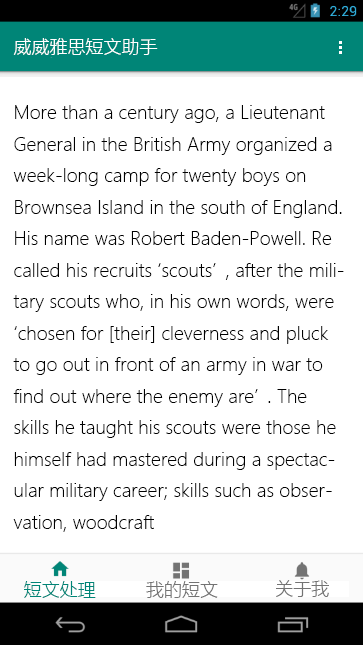
<style>
.page{position:relative;width:363px;height:645px;background:#ffffff}
.page>*{position:absolute;margin:0}
.t1{font:18px "MicrosoftYaHeiUILight";color:#ffffff}
.t2{font:18px "MicrosoftYaHeiUILight";color:#000000}
.t3{font:18px "MicrosoftYaHeiUILight";color:#008577}
.t4{font:18px "MicrosoftYaHeiUILight";color:#737373}
</style>
<div class="page">
<p class="t1" style="left:13px;top:38px;width:145px;height:17px">威威雅思短文助手</p>
<p class="t2" style="left:13px;top:105px;width:331px;height:427px">More than a century ago, a Lieutenant General in the British Army organized a week-long camp for twenty boys on Brownsea Island in the south of England. His name was Robert Baden-Powell. Re called his recruits ‘scouts’, after the military scouts who, in his own words, were ‘chosen for [their] cleverness and pluck to go out in front of an army in war to find out where the enemy are’. The skills he taught his scouts were those he himself had mastered during a spectacular military career; skills such as observation, woodcraft</p>
<p class="t3" style="left:24px;top:581px;width:72px;height:17px">短文处理</p>
<p class="t4" style="left:146px;top:581px;width:72px;height:17px">我的短文</p>
<p class="t4" style="left:276px;top:580px;width:53px;height:17px">关于我</p>
</div>
